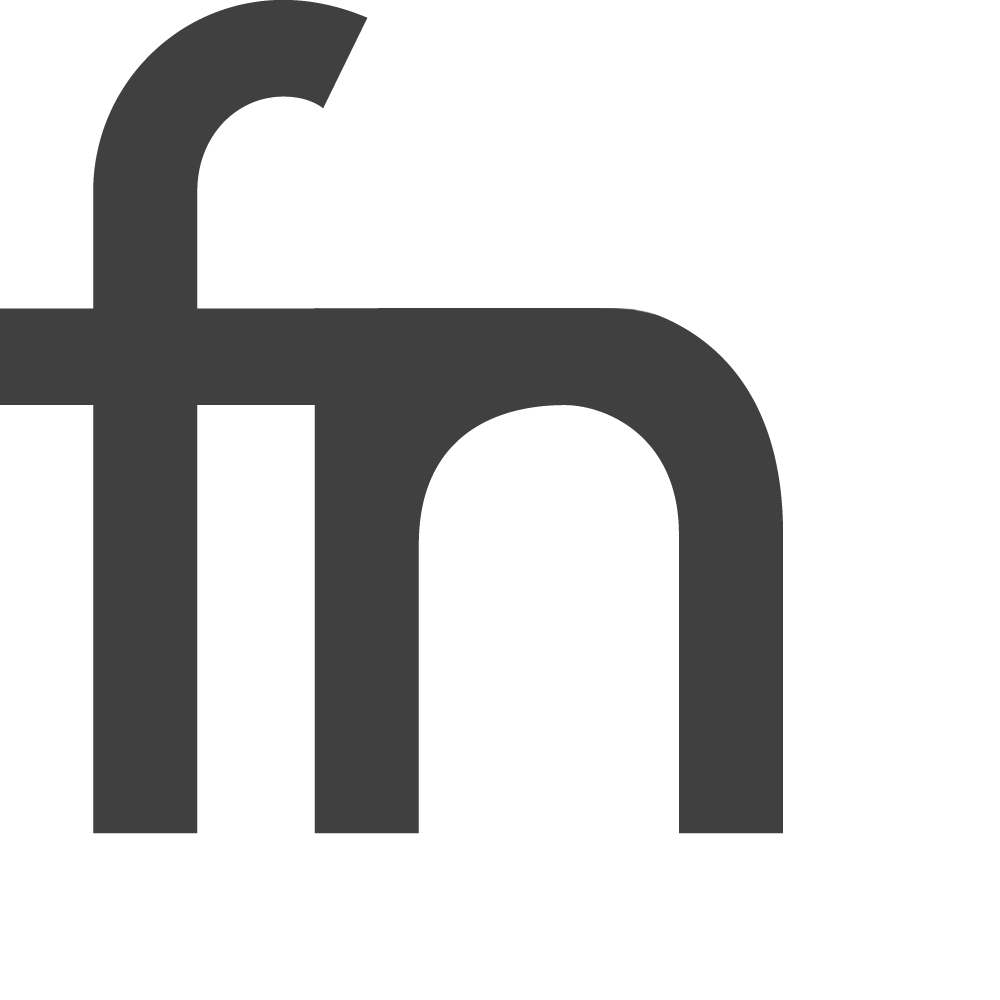
<style>
.page{position:relative;width:1000px;height:1000px;background:#ffffff}
.page>*{position:absolute;margin:0}
.t1{font:1049.1px "Simpel-Medium";color:#404040}
</style>
<div class="page">
<p class="t1" style="left:0px;top:0px;width:368px;height:834px">f</p>
</div>
